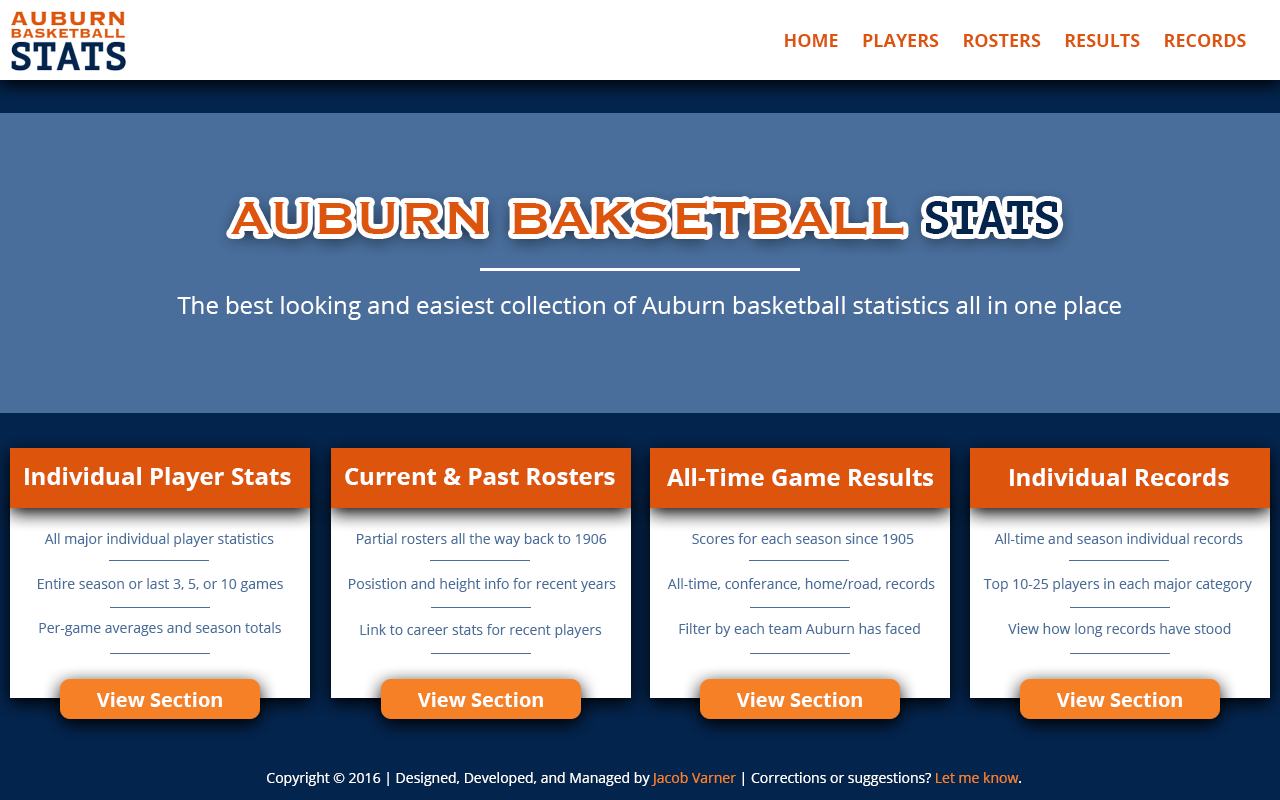
<style>
.page{position:relative;width:1280px;height:800px;background:#496e9c}
.page>*{position:absolute;margin:0}
.t1{font:18px "OpenSans-Bold";color:#dd550c}
.t2{font:60px "Copperplate";color:#dd550c}
.t3{font:46px "PTMono-Bold";color:#03244d}
.t4{font:24px "OpenSans";color:#ffffff}
.t5{font:24px "OpenSans-Bold";color:#ffffff}
.t6{font:14px "OpenSans";color:#496e9c}
.t7{font:14px "OpenSans";color:#ffffff}
.t8{font:14px "OpenSans";color:#f68026}
</style>
<div class="page">
<p class="t1" style="left:785px;top:34px;width:461px;height:13px">HOME     PLAYERS     ROSTERS     RESULTS     RECORDS</p>
<p class="t2" style="left:231px;top:201px;width:828px;height:34px">AUBURN BAKSETBALL <span class="t3">STATS</span></p>
<p class="t4" style="left:177px;top:296px;width:944px;height:24px">The best looking and easiest collection of Auburn basketball statistics all in one place</p>
<p class="t5" style="left:25px;top:467px;width:266px;height:24px">Individual Player Stats</p>
<p class="t5" style="left:345px;top:468px;width:270px;height:17px">Current &amp; Past Rosters</p>
<p class="t5" style="left:667px;top:468px;width:266px;height:18px">All-Time Game Results</p>
<p class="t5" style="left:1010px;top:468px;width:219px;height:18px">Individual Records</p>
<p class="t6" style="left:44px;top:533px;width:230px;height:14px">All major individual player statistics</p>
<p class="t6" style="left:357px;top:533px;width:250px;height:14px">Partial rosters all the way back to 1906</p>
<p class="t6" style="left:692px;top:533px;width:222px;height:11px">Scores for each season since 1905</p>
<p class="t6" style="left:994px;top:533px;width:249px;height:11px">All-time and season individual records</p>
<p class="t6" style="left:38px;top:578px;width:245px;height:14px">Entire season or last 3, 5, or 10 games</p>
<p class="t6" style="left:349px;top:578px;width:267px;height:14px">Posistion and height info for recent years</p>
<p class="t6" style="left:667px;top:578px;width:268px;height:12px">All-time, conferance, home/road, records</p>
<p class="t6" style="left:983px;top:578px;width:269px;height:14px">Top 10-25 players in each major category</p>
<p class="t6" style="left:39px;top:622px;width:242px;height:14px">Per-game averages and season totals</p>
<p class="t6" style="left:360px;top:624px;width:242px;height:14px">Link to career stats for recent players</p>
<p class="t6" style="left:679px;top:623px;width:241px;height:14px">Filter by each team Auburn has faced</p>
<p class="t6" style="left:1008px;top:623px;width:223px;height:14px">View how long records have stood</p>
<p class="t7" style="left:267px;top:772px;width:754px;height:14px">Copyright © 2016 | Designed, Developed, and Managed by <span class="t8">Jacob Varner</span> | Corrections or suggestions? <span class="t8">Let me know</span>.</p>
</div>
